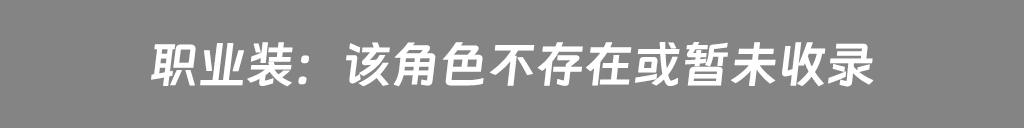
<style>
.page{position:relative;width:1024px;height:128px;background:#848484}
.page>*{position:absolute;margin:0}
.t1{font:50px "DingTalk-JinBuTi";letter-spacing:-0.06em;color:#ffffff;font-weight:bold}
</style>
<div class="page">
<p class="t1" style="left:151px;top:42px;width:723px;height:45px">职业装：该角色不存在或暂未收录</p>
</div>
